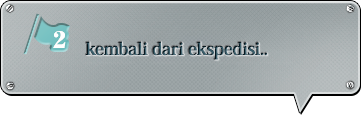
<style>
.page{position:relative;width:361px;height:115px}
.page>*{position:absolute;margin:0}
.t1{font:18px "HeiseiMinStd-W7";letter-spacing:-0.04em;font-weight:bold}
</style>
<div class="page">
<p class="t1" style="left:86px;top:41px;width:182px;height:19px">kembali dari ekspedisi..</p>
</div>
